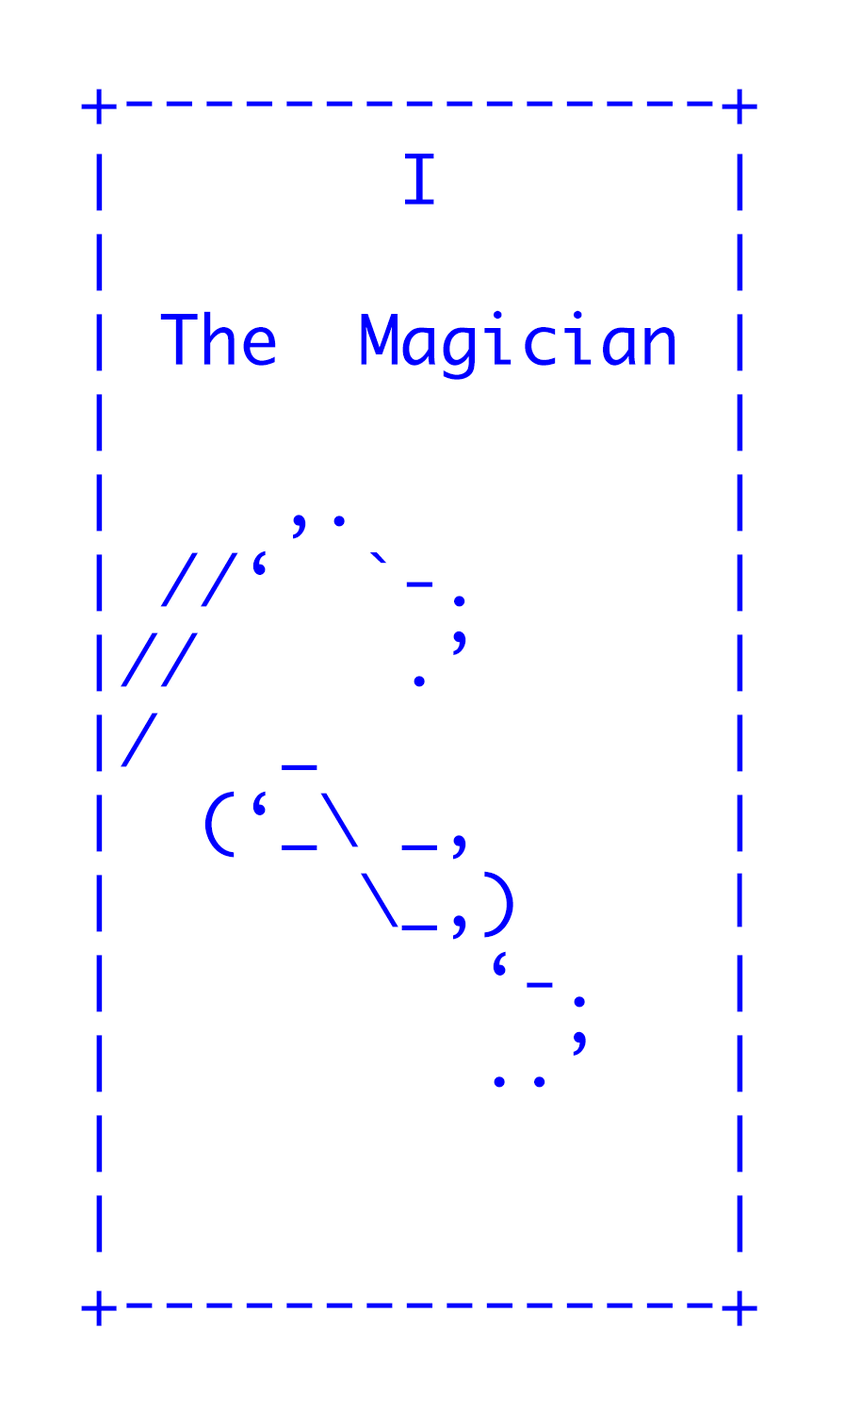
<style>
.page{position:relative;width:845px;height:1411px;background:#ffffff}
.page>*{position:absolute;margin:0}
.t1{font:66.7px "Monaco";color:#0000ff}
</style>
<div class="page">
<p class="t1" style="left:81px;top:89px;width:677px;height:1237px">+---------------+<br>│       I       │<br>│               │<br>│ The  Magician │<br>│               │<br>│    ,.         │<br>│ //‘  `-.      │ <br>│//     .’      │ <br>│/   _          │ <br>│  (‘_\ _,      │ <br>│      \_,)     | <br>│         ‘-.   │  <br>│         ..’   │<br>│               │<br>│               │<br>+---------------+</p>
</div>
